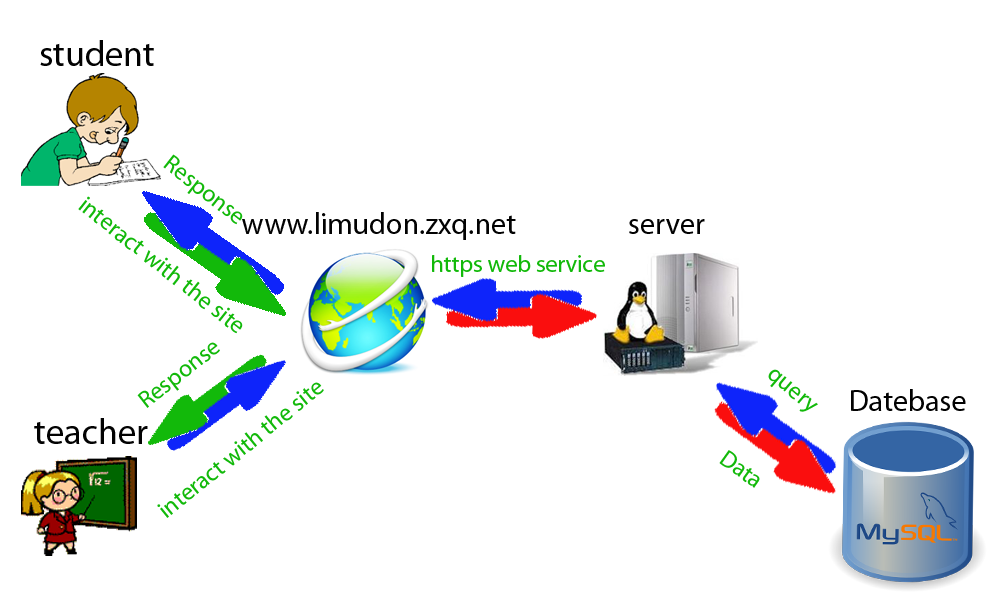
<style>
.page{position:relative;width:1000px;height:600px;background:#ffffff}
.page>*{position:absolute;margin:0}
.t1{font:36px "MyriadPro-Regular";color:#020202}
.t2{font:24px "MyriadPro-Regular";color:#12b90a}
.t3{font:30px "MyriadPro-Regular";color:#020202}
</style>
<div class="page">
<p class="t1" style="left:40px;top:40px;width:114px;height:26px">student</p>
<p class="t2" style="left:163px;top:154px;width:80px;height:71px;rotate:38deg">Response</p>
<p class="t2" style="left:78px;top:196px;width:165px;height:138px;rotate:38deg">interact with the site</p>
<p class="t3" style="left:242px;top:212px;width:274px;height:28px">www.limudon.zxq.net</p>
<p class="t3" style="left:629px;top:219px;width:76px;height:15px">server</p>
<p class="t2" style="left:432px;top:255px;width:173px;height:22px">https web service</p>
<p class="t2" style="left:137px;top:342px;width:83px;height:66px;rotate:-38deg">Response</p>
<p class="t2" style="left:768px;top:369px;width:50px;height:43px;rotate:40deg">query</p>
<p class="t2" style="left:157px;top:382px;width:167px;height:136px;rotate:-39deg">interact with the site</p>
<p class="t3" style="left:851px;top:389px;width:115px;height:22px">Datebase</p>
<p class="t1" style="left:34px;top:418px;width:114px;height:26px">teacher</p>
<p class="t2" style="left:719px;top:450px;width:41px;height:38px;rotate:35deg">Data</p>
</div>
